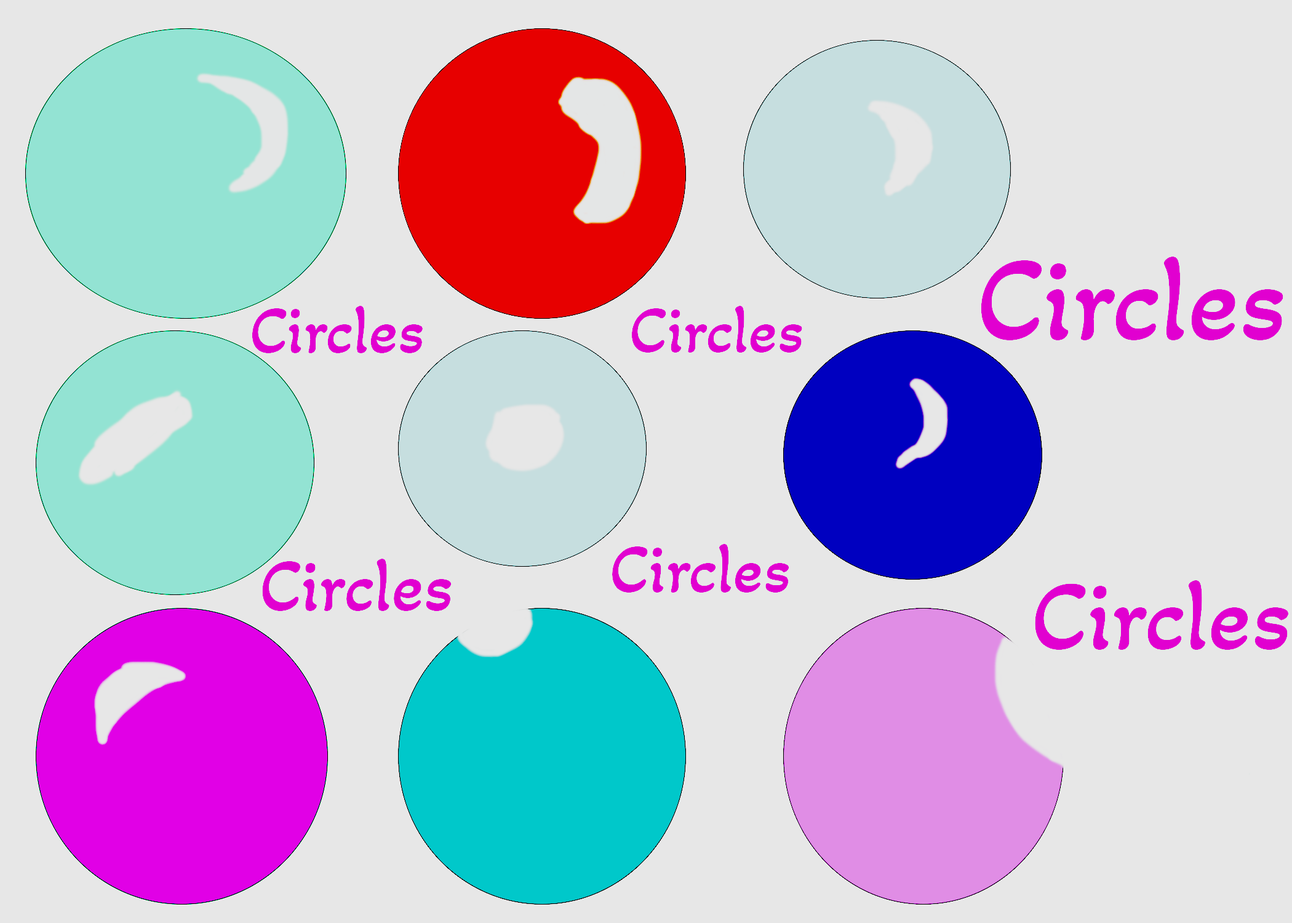
<style>
.page{position:relative;width:1292px;height:923px;background:#e7e7e7}
.page>*{position:absolute;margin:0}
.t1{font:120.8px "AkayaTelivigala-Regular";color:#e100d0}
.t2{font:68.3px "AkayaTelivigala-Regular";color:#e100d0}
.t3{font:68px "AkayaTelivigala-Regular";color:#e100d0}
.t4{font:70.4px "AkayaTelivigala-Regular";color:#e100d0}
.t5{font:75.5px "AkayaTelivigala-Regular";color:#e100d0}
.t6{font:101.1px "AkayaTelivigala-Regular";color:#e100d0}
</style>
<div class="page">
<p class="t1" style="left:981px;top:257px;width:302px;height:83px">Circles</p>
<p class="t2" style="left:252px;top:306px;width:171px;height:47px">Circles</p>
<p class="t3" style="left:631px;top:306px;width:171px;height:47px">Circles</p>
<p class="t4" style="left:612px;top:544px;width:177px;height:48px">Circles</p>
<p class="t5" style="left:262px;top:559px;width:190px;height:52px">Circles</p>
<p class="t6" style="left:1035px;top:580px;width:253px;height:70px">Circles</p>
</div>
